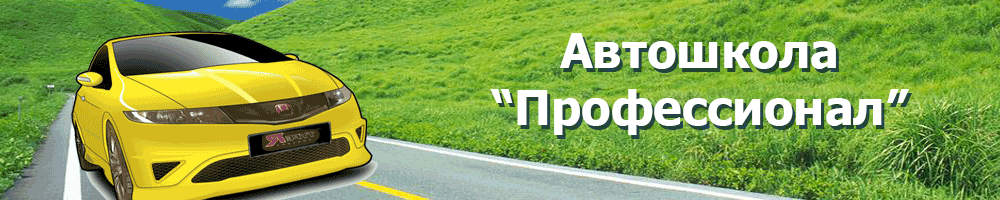
<style>
.page{position:relative;width:1000px;height:200px}
.page>*{position:absolute;margin:0}
.t1{font:48px "Tahoma-Bold";color:#ffffff}
</style>
<div class="page">
<p class="t1" style="left:490px;top:33px;width:419px;height:102px;text-align:center">Автошкола “Профессионал”</p>
</div>
